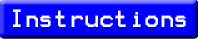
<style>
.page{position:relative;width:198px;height:39px;background:#0000ff}
.page>*{position:absolute;margin:0}
.t1{font:20px "Terminal";color:#ffffff}
</style>
<div class="page">
<p class="t1" style="left:13px;top:9px;width:173px;height:18px">Instructions</p>
</div>
